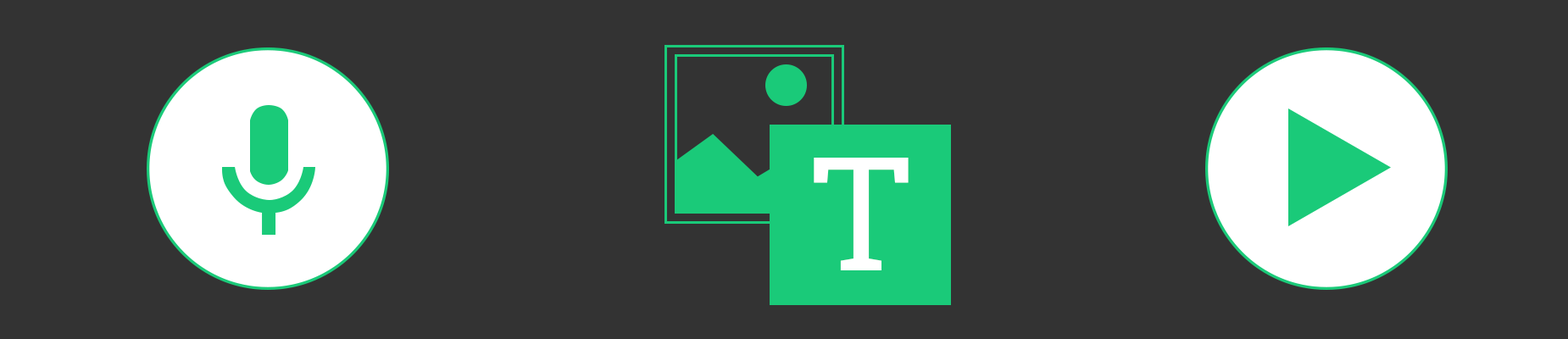
<style>
.page{position:relative;width:1568px;height:339px;background:#333333}
.page>*{position:absolute;margin:0}
.t1{font:159.1px "RobotoSlab-Regular";letter-spacing:-0.005em;color:#ffffff}
</style>
<div class="page">
<p class="t1" style="left:814px;top:158px;width:95px;height:112px">T</p>
</div>
